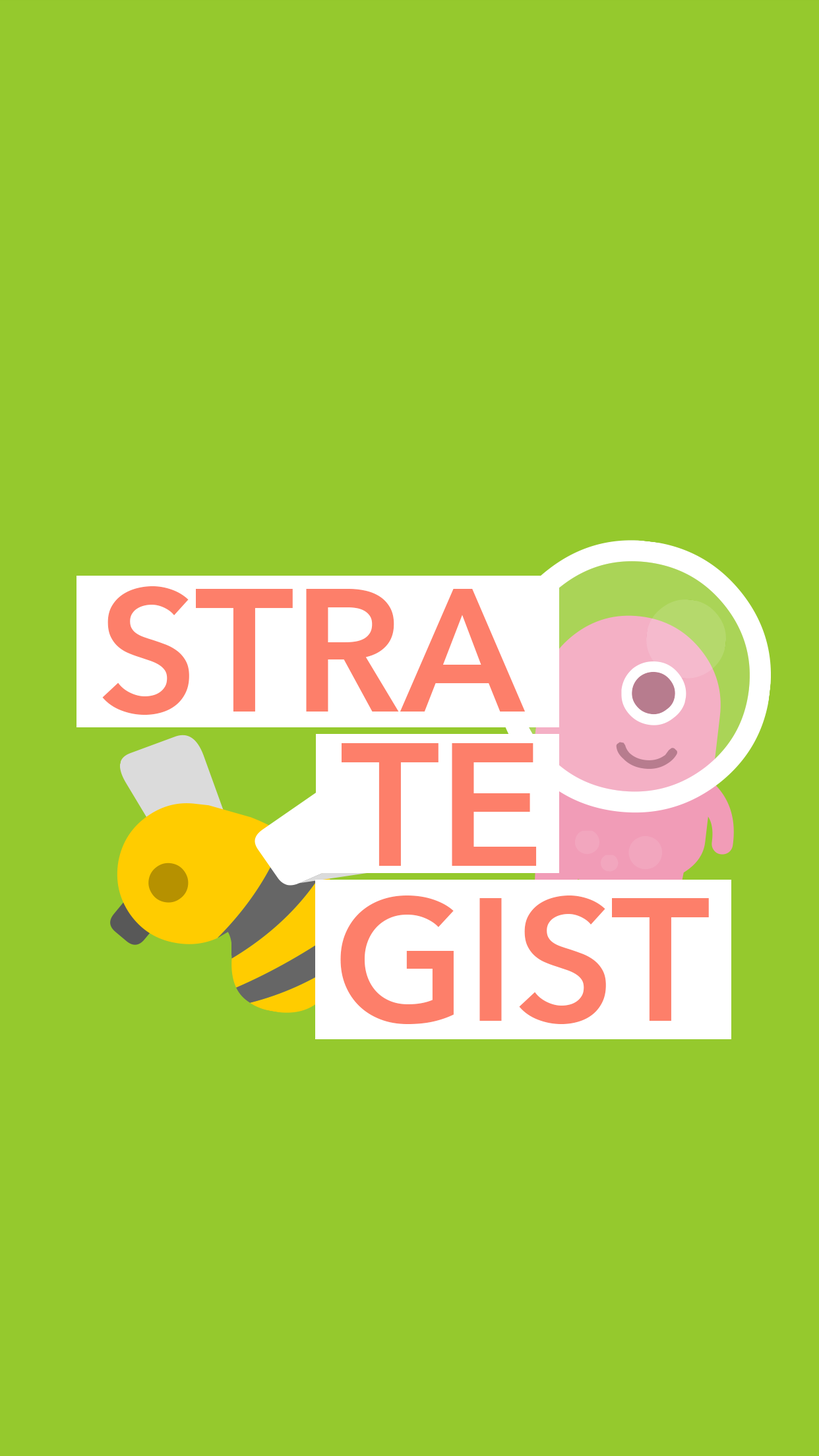
<style>
.page{position:relative;width:819px;height:1456px;background:#95c92d}
.page>*{position:absolute;margin:0}
.t1{font:172.6px "AvenirNext-DemiBold";color:#fd7f6a}
</style>
<div class="page">
<p class="t1" style="left:102px;top:586px;width:424px;height:129px">STRA</p>
<p class="t1" style="left:342px;top:743px;width:195px;height:123px">TE</p>
<p class="t1" style="left:340px;top:895px;width:369px;height:129px">GIST</p>
</div>
